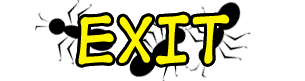
<style>
.page{position:relative;width:305px;height:81px;background:#ffffff}
.page>*{position:absolute;margin:0}
.t1{font:60px "DigitalStrip";color:#fef500}
</style>
<div class="page">
<p class="t1" style="left:78px;top:14px;width:152px;height:51px">EXIT</p>
<p class="t1" style="left:78px;top:14px;width:152px;height:51px">EXIT</p>
</div>
